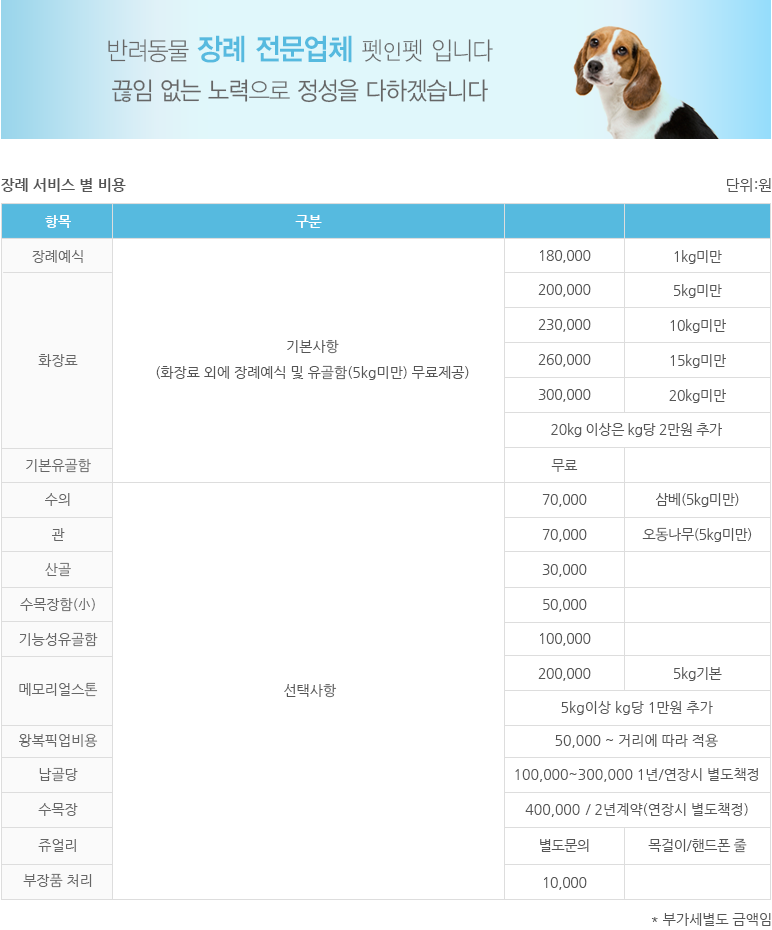
<style>
.page{position:relative;width:772px;height:930px;background:#ffffff}
.page>*{position:absolute;margin:0}
.t1{font:25px/40px "YDVYGO32";letter-spacing:-0.025em;color:#666666;scale:0.91 1}
.t2{font:25px/40px "YDVYGO31";letter-spacing:-0.025em;color:#666666;scale:0.91 1}
.t3{font:30px/40px "YDVYGO34";letter-spacing:-0.025em;color:#56badf;scale:0.91 1}
.t4{font:25px/40px "YDVYGO31";letter-spacing:0.05em;color:#666666;scale:0.91 1}
.t5{font:21px/40px "YDVYGO31";letter-spacing:0.05em;color:#666666;scale:0.91 1}
.t6{font:15px "NanumGothicBold";color:#555555}
.t7{font:15px "NanumGothic";color:#555555}
.t8{font:14px/34.8px "NanumGothic";color:#666666}
.t9{font:14px/34.8px "NanumGothicBold";color:#ffffff}
.t10{font:14px/50.8px "NanumGothic";color:#666666}
.t11{font:14px/15.8px "NanumGothic";color:#666666}
.t12{font:14px/33.8px "NanumGothic";color:#666666}
.t13{font:14px/36.8px "NanumGothic";color:#666666}
.t14{font:14px "NanumGothicBold";color:#ffffff}
.t15{font:14px/34.8px "NanumGothic";letter-spacing:-0.025em;color:#555555}
.t16{font:14px/34.8px "NanumGothicBold";letter-spacing:-0.025em;color:#ffffff}
.t17{font:14px/36.8px "NanumGothic";letter-spacing:-0.025em;color:#555555}
.t18{font:14px/33.8px "NanumGothic";letter-spacing:-0.025em;color:#555555}
.t19{font:14px/29.8px "NanumGothic";letter-spacing:-0.025em;color:#555555}
.t20{font:14px/32.8px "NanumGothic";letter-spacing:-0.025em;color:#555555}
.t21{font:14px/26px "NanumGothic";color:#555555}
.t22{font:14px "NanumGothic";color:#555555}
</style>
<div class="page">
<p class="t1" style="left:108px;top:35px;width:385px;height:68px;text-align:center"><span class="t2">반려동물 </span><span class="t3">장례 전문업체 </span><span class="t4">펫</span><span class="t5">인</span><span class="t4">펫</span><span class="t2"> 입니다<br></span>끊임 없는 노력<span class="t2">으로</span> 정성을 다하겠습니다</p>
<p class="t6" style="left:1px;top:178px;width:125px;height:14px">장례 서비스 별 비용</p>
<p class="t7" style="left:727px;top:178px;width:44px;height:14px">단위:원</p>
<p class="t8" style="left:19px;top:215px;width:79px;height:673px;text-align:center"><span class="t9">항목<br></span>장례예식<br><br><br>화장료<br><br><br>기본유골함<br>수의<br>관<br>산골<br>수목장함(小)<br>기능성유골함<br><span class="t10">메모리얼스톤<br><br></span><span class="t11">왕복픽업비용<br></span><span class="t12">납골당<br></span>수목장<br><span class="t13">쥬얼리<br></span>부장품 처리</p>
<p class="t14" style="left:295px;top:215px;width:27px;height:13px">구분</p>
<p class="t15" style="left:538px;top:214px;width:184px;height:676px;text-align:center"><span class="t16">소비자가<br></span>180,000<br>200,000<br>230,000<br>260,000<br>300,000<br>    20kg 이상은 kg당 2만원 추가<br><span class="t17">무료<br></span><span class="t18">70,000<br></span>70,000<br>30,000<br>50,000<br>100,000<br>200,000<br><br><br><br><br><span class="t19">별도문의<br></span><span class="t17">10,000</span></p>
<p class="t15" style="left:642px;top:215px;width:110px;height:638px;text-align:center"><span class="t16">비고<br></span>1kg미만<br>5kg미만<br>10kg미만<br>15kg미만<br>20kg미만<br><br><br>삼베(5kg미만)<br>오동나무(5kg미만)<br><br><br><br>5kg기본<br><br><br><br><br><span class="t20">목걸이/핸드폰 줄</span></p>
<p class="t21" style="left:156px;top:339px;width:313px;height:41px;text-align:center">기본사항<br>(화장료 외에 장례예식 및 유골함(5kg미만) 무료제공)</p>
<p class="t22" style="left:284px;top:683px;width:53px;height:15px">선택사항</p>
<p class="t22" style="left:561px;top:701px;width:152px;height:14px">5kg이상 kg당 1만원 추가</p>
<p class="t22" style="left:555px;top:733px;width:163px;height:15px">50,000 ~ 거리에 따라 적용</p>
<p class="t22" style="left:515px;top:768px;width:243px;height:14px">100,000~300,000 1년/연장시 별도책정</p>
<p class="t22" style="left:525px;top:803px;width:223px;height:14px">400,000 / 2년계약(연장시 별도책정)</p>
<p class="t22" style="left:651px;top:913px;width:120px;height:13px">* 부가세별도 금액임</p>
</div>
